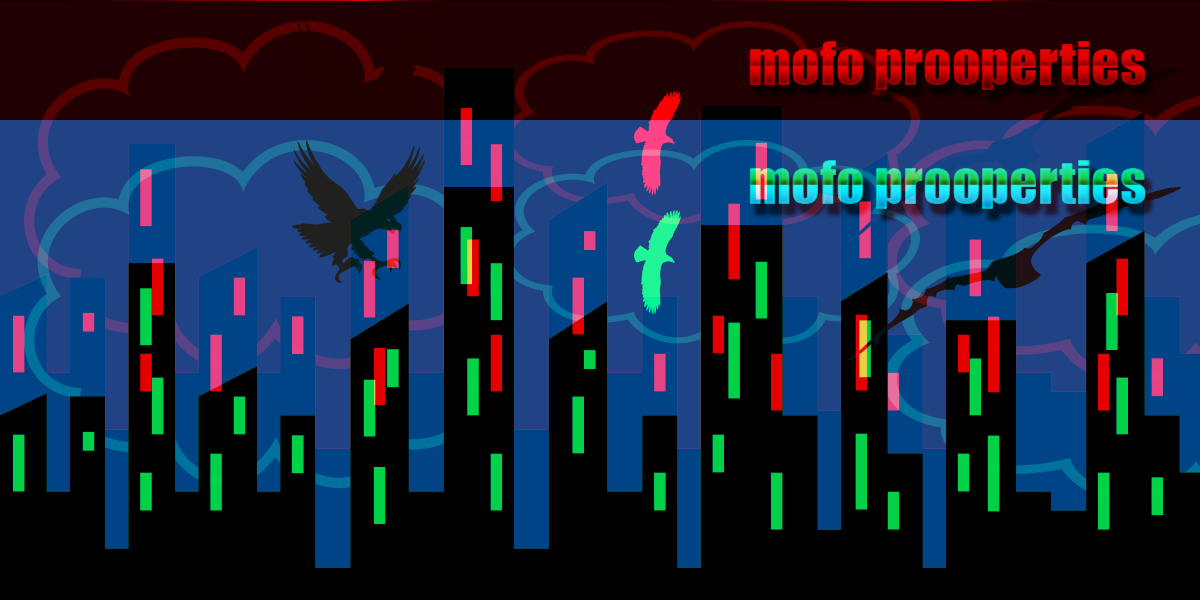
<style>
.page{position:relative;width:1200px;height:600px;background:#000000}
.page>*{position:absolute;margin:0}
.t1{font:55.9px "Impact"}
</style>
<div class="page">
<p class="t1" style="left:749px;top:40px;width:397px;height:49px">mofo prooperties</p>
</div>
